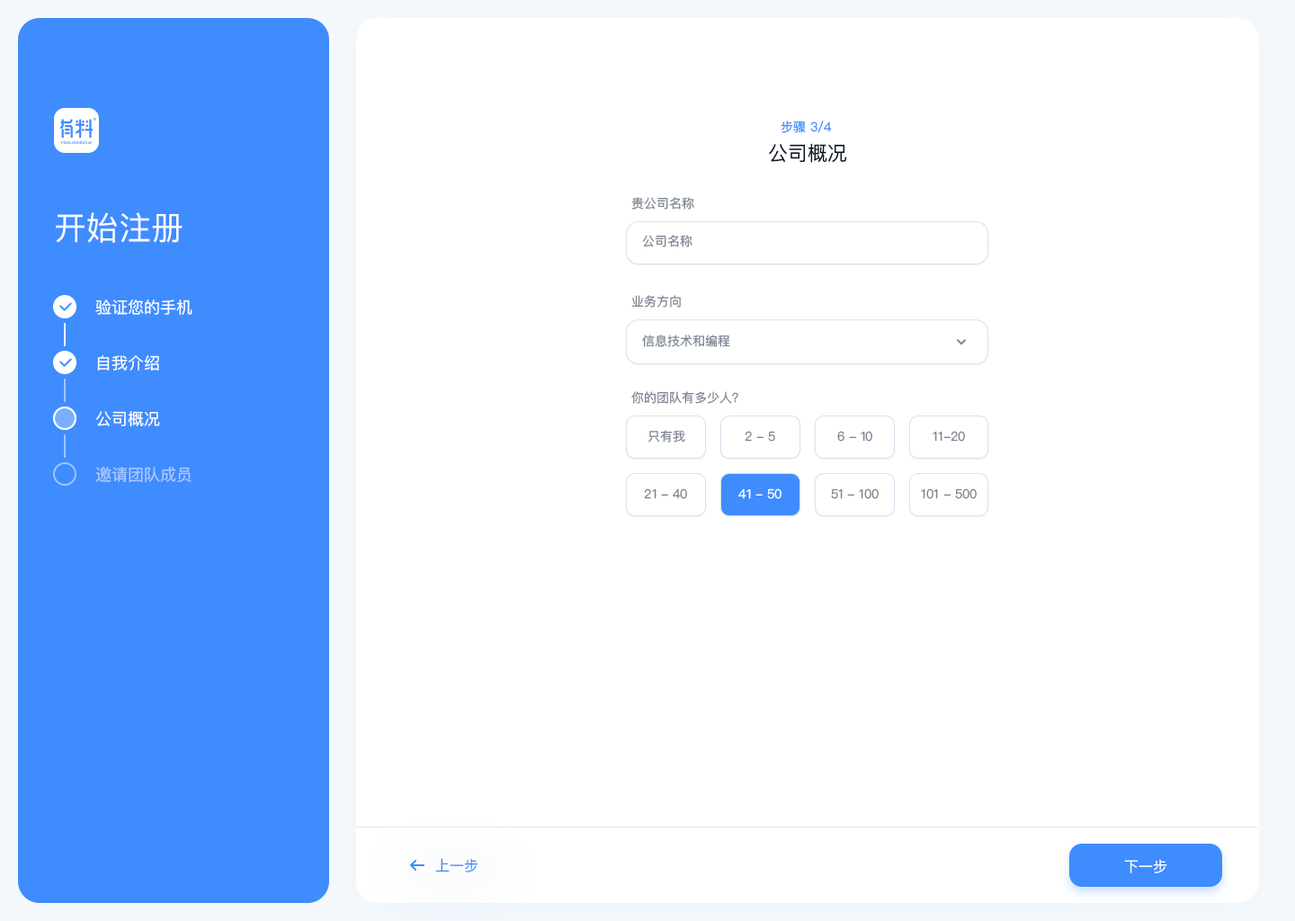
<style>
.page{position:relative;width:1295px;height:921px;background:#ffffff}
.page>*{position:absolute;margin:0}
.t1{font:12.6px "PingFangSC-Regular";color:#3f8cff;text-transform:uppercase}
.t2{font:19.8px "PingFangSC-Regular";color:#0a1629}
.t3{font:12.6px "PingFangSC-Regular";color:#7d8592}
.t4{font:32.4px "PingFangSC-Regular";color:#ffffff}
.t5{font:16.2px "PingFangSC-Regular";color:#ffffff}
.t6{font:16.2px "PingFangSC-Regular";color:#b0caff}
.t7{font:12.6px "PingFangSC-Regular";color:#ffffff}
.t8{font:14.4px "PingFangSC-Regular";color:#3f8cff}
.t9{font:14.4px "PingFangSC-Regular";color:#ffffff}
</style>
<div class="page">
<p class="t1" style="left:781px;top:121px;width:51px;height:12px">步骤 3/4</p>
<p class="t2" style="left:769px;top:143px;width:78px;height:20px">公司概况</p>
<p class="t3" style="left:631px;top:197px;width:63px;height:13px">贵公司名称</p>
<p class="t4" style="left:56px;top:212px;width:127px;height:31px">开始注册</p>
<p class="t3" style="left:642px;top:235px;width:50px;height:12px">公司名称</p>
<p class="t5" style="left:95px;top:299px;width:97px;height:16px">验证您的手机</p>
<p class="t3" style="left:631px;top:295px;width:50px;height:13px">业务方向</p>
<p class="t3" style="left:642px;top:335px;width:88px;height:12px">信息技术和编程</p>
<p class="t5" style="left:97px;top:355px;width:62px;height:15px">自我介绍</p>
<p class="t3" style="left:631px;top:391px;width:107px;height:13px">你的团队有多少人？</p>
<p class="t5" style="left:95px;top:411px;width:65px;height:15px">公司概况</p>
<p class="t3" style="left:648px;top:430px;width:37px;height:12px">只有我</p>
<p class="t3" style="left:745px;top:431px;width:30px;height:11px">2 - 5</p>
<p class="t3" style="left:837px;top:431px;width:35px;height:11px">6 - 10</p>
<p class="t3" style="left:933px;top:431px;width:32px;height:11px">11-20</p>
<p class="t6" style="left:95px;top:467px;width:97px;height:15px">邀请团队成员</p>
<p class="t3" style="left:644px;top:488px;width:43px;height:11px">21 - 40</p>
<p class="t7" style="left:738px;top:488px;width:43px;height:11px">41 - 50</p>
<p class="t3" style="left:831px;top:488px;width:48px;height:11px">51 - 100</p>
<p class="t3" style="left:921px;top:488px;width:56px;height:11px">101 - 500</p>
<p class="t8" style="left:435px;top:858px;width:43px;height:14px">上一步</p>
<p class="t9" style="left:1124px;top:859px;width:43px;height:14px">下一步</p>
</div>
